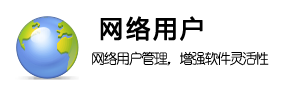
<style>
.page{position:relative;width:300px;height:100px;background:#ffffff}
.page>*{position:absolute;margin:0}
.t1{font:24px "MicrosoftYaHei";letter-spacing:0.1em;color:#000000;font-weight:bold}
.t2{font:14px "YouYuan";letter-spacing:-0.1em;color:#000000}
</style>
<div class="page">
<p class="t1" style="left:100px;top:16px;width:103px;height:25px">网络用户</p>
<p class="t2" style="left:92px;top:51px;width:177px;height:15px">网络用户管理，增强软件灵活性</p>
</div>
